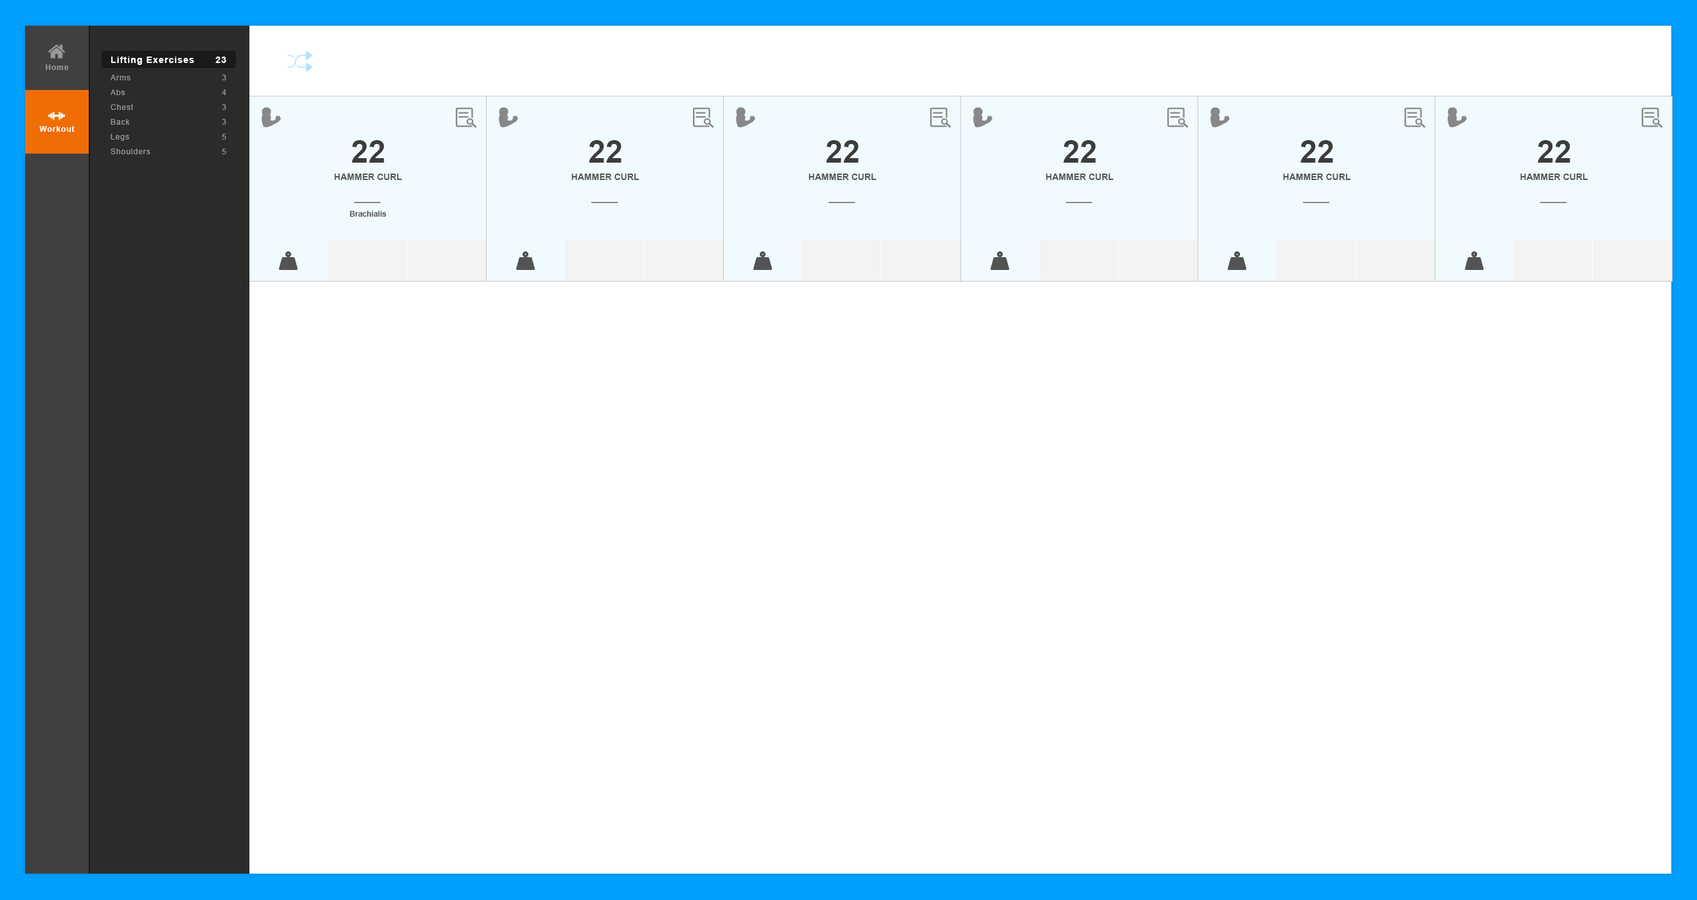
<style>
.page{position:relative;width:1697px;height:900px;background:#ffffff}
.page>*{position:absolute;margin:0}
.t1{font:7.7px "Arial-BoldMT";letter-spacing:0.08em;color:#999999}
.t2{font:9px "Arial-BoldMT";letter-spacing:0.08em;color:#ffffff}
.t3{font:7.7px/14.8px "ArialMT";letter-spacing:0.08em;color:#999999}
.t4{font:7.7px "Arial-BoldMT";letter-spacing:0.08em;color:#ffffff}
.t5{font:30.9px "Arial-BoldMT";color:#3c3c3c}
.t6{font:9px "Arial-BoldMT";color:#535353}
.t7{font:7.7px "Arial-BoldMT";color:#535353}
</style>
<div class="page">
<p class="t1" style="left:46px;top:64px;width:23px;height:6px">Home</p>
<p class="t2" style="left:111px;top:57px;width:83px;height:8px">Lifting Exercises</p>
<p class="t2" style="left:215px;top:57px;width:11px;height:6px">23</p>
<p class="t3" style="left:111px;top:75px;width:39px;height:79px">Arms<br>Abs<br>Chest<br>Back<br>Legs<br>Shoulders</p>
<p class="t3" style="left:222px;top:75px;width:4px;height:79px;text-align:right">3<br>4<br>3<br>3<br>5<br>5</p>
<p class="t4" style="left:39px;top:126px;width:36px;height:6px">Workout</p>
<p class="t5" style="left:352px;top:140px;width:32px;height:23px">22</p>
<p class="t5" style="left:589px;top:140px;width:33px;height:23px">22</p>
<p class="t5" style="left:826px;top:140px;width:33px;height:23px">22</p>
<p class="t5" style="left:1063px;top:140px;width:33px;height:23px">22</p>
<p class="t5" style="left:1301px;top:140px;width:32px;height:23px">22</p>
<p class="t5" style="left:1538px;top:140px;width:33px;height:23px">22</p>
<p class="t6" style="left:334px;top:174px;width:68px;height:6px">HAMMER CURL</p>
<p class="t6" style="left:572px;top:174px;width:67px;height:6px">HAMMER CURL</p>
<p class="t6" style="left:809px;top:174px;width:67px;height:6px">HAMMER CURL</p>
<p class="t6" style="left:1046px;top:174px;width:67px;height:6px">HAMMER CURL</p>
<p class="t6" style="left:1283px;top:174px;width:68px;height:6px">HAMMER CURL</p>
<p class="t6" style="left:1520px;top:174px;width:68px;height:6px">HAMMER CURL</p>
<p class="t7" style="left:350px;top:211px;width:36px;height:6px">Brachialis</p>
</div>
